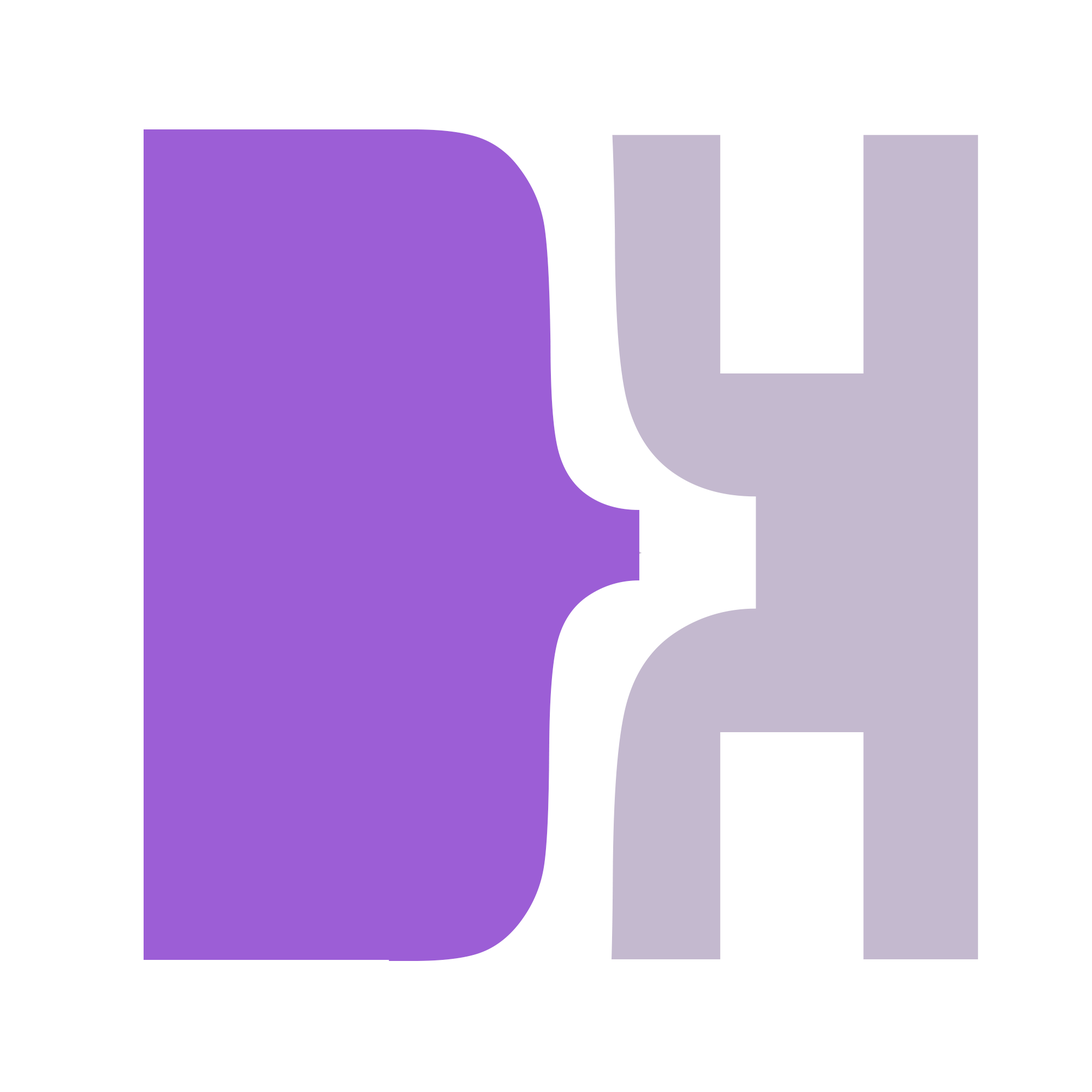
<style>
.page{position:relative;width:1092px;height:1092px;background:#ffffff}
.page>*{position:absolute;margin:0}
.t1{font:887.2px "GillSans";color:#9c5ed6}
.t2{font:1130.6px "Hack-Bold";color:#c4b9cf;scale:0.7 1}
</style>
<div class="page">
<p class="t1" style="left:389px;top:129px;width:250px;height:832px">}</p>
<p class="t2" style="left:606px;top:135px;width:372px;height:824px">H</p>
</div>
